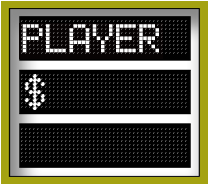
<style>
.page{position:relative;width:208px;height:184px;background:#000000}
.page>*{position:absolute;margin:0}
.t1{font:35px "Lcdphone";color:#ffffff}
.t2{font:36px "LED-BOARD-REVERSED";color:#ffffff}
</style>
<div class="page">
<p class="t1" style="left:22px;top:24px;width:137px;height:29px">PLAYER</p>
<p class="t2" style="left:21px;top:74px;width:166px;height:36px">$</p>
</div>
